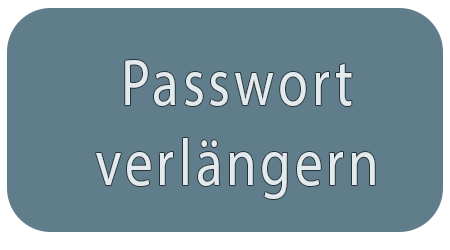
<style>
.page{position:relative;width:450px;height:250px;background:#607d8b}
.page>*{position:absolute;margin:0}
.t1{font:66.7px "MyriadPro-Regular";letter-spacing:0.075em;color:#e3eaed;scale:0.82 1}
</style>
<div class="page">
<p class="t1" style="left:96px;top:60px;width:279px;height:139px;text-align:center">Passwort<br>verlängern</p>
</div>
